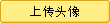
<style>
.page{position:relative;width:110px;height:23px;background:#ffee84}
.page>*{position:absolute;margin:0}
.t1{font:12px "SIL-Hei-Med-Jian";letter-spacing:0.05em;color:#000000}
</style>
<div class="page">
<p class="t1" style="left:30px;top:6px;width:49px;height:11px">上传头像</p>
</div>
